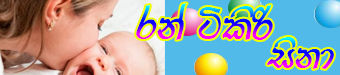
<style>
.page{position:relative;width:340px;height:75px;background:#51bae9}
.page>*{position:absolute;margin:0}
.t1{font:53.7px "FMDeranax"}
.t2{font:50px "FMDeranax"}
</style>
<div class="page">
<p class="t1" style="left:136px;top:3px;width:137px;height:37px">rka álsß</p>
<p class="t2" style="left:267px;top:37px;width:67px;height:32px">iskd</p>
</div>
